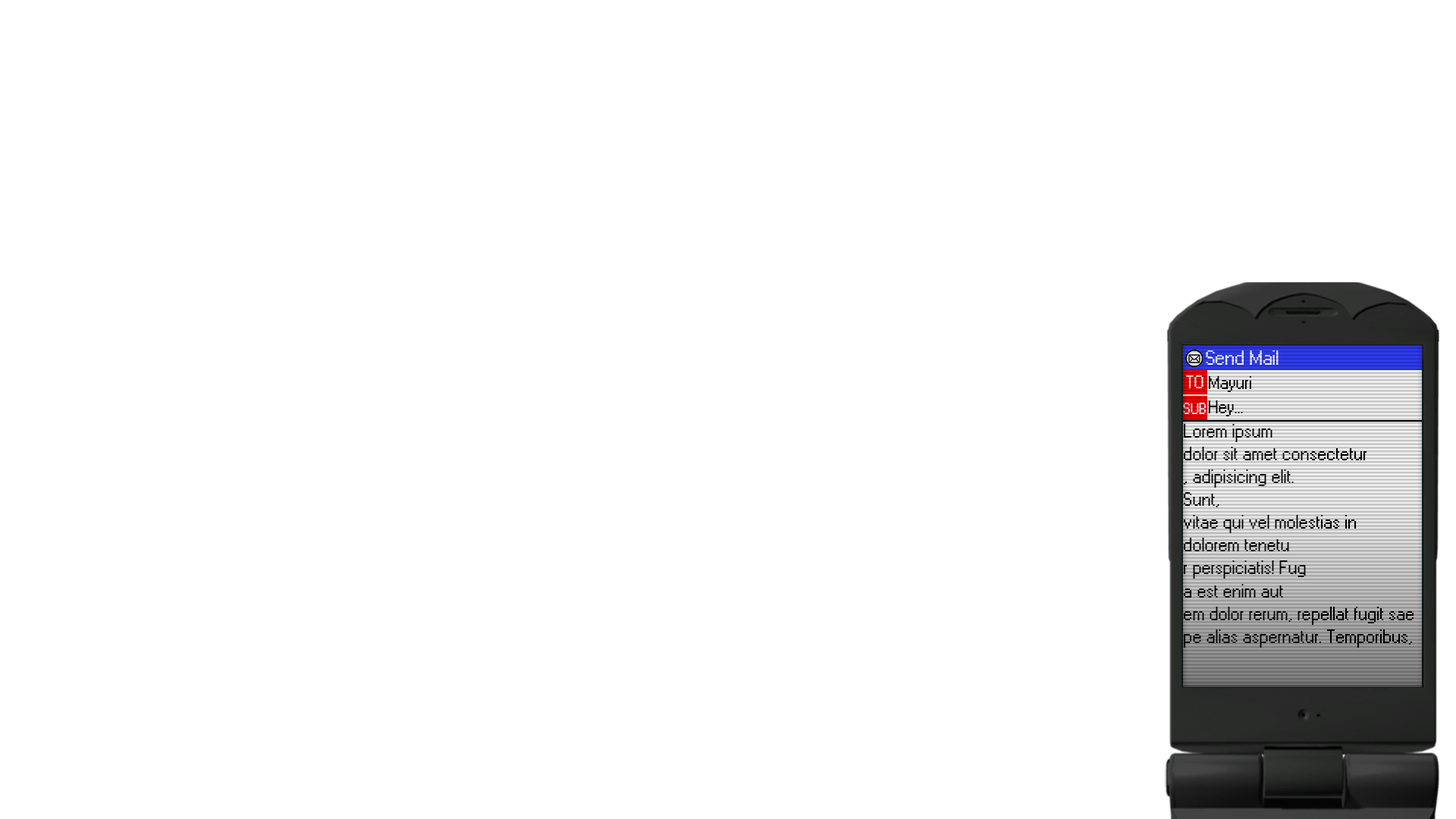
<style>
.page{position:relative;width:1456px;height:819px;background:#ffffff}
.page>*{position:absolute;margin:0}
.t1{font:20.5px "Windows"}
.t2{font:17.3px "Windows";color:#d1d1d1}
.t3{font:18.3px "Windows";color:#000000}
.t4{font:15.3px "Windows"}
.t5{font:19px "Windows";color:#000000}
</style>
<div class="page">
<p class="t1" style="left:1206px;top:350px;width:73px;height:15px">Send Mail</p>
<p class="t2" style="left:1186px;top:375px;width:17px;height:13px">TO</p>
<p class="t3" style="left:1208px;top:376px;width:43px;height:16px">Mayuri</p>
<p class="t3" style="left:1208px;top:400px;width:35px;height:16px">Hey...</p>
<p class="t4" style="left:1183px;top:403px;width:23px;height:11px">SUB</p>
<p class="t5" style="left:1183px;top:424px;width:231px;height:224px">Lorem ipsum <br>dolor sit amet consectetur<br>, adipisicing elit. <br>Sunt, <br>vitae qui vel molestias in <br>dolorem tenetu<br>r perspiciatis! Fug<br>a est enim aut<br>em dolor rerum, repellat fugit sae<br>pe alias aspernatur. Temporibus,</p>
</div>
